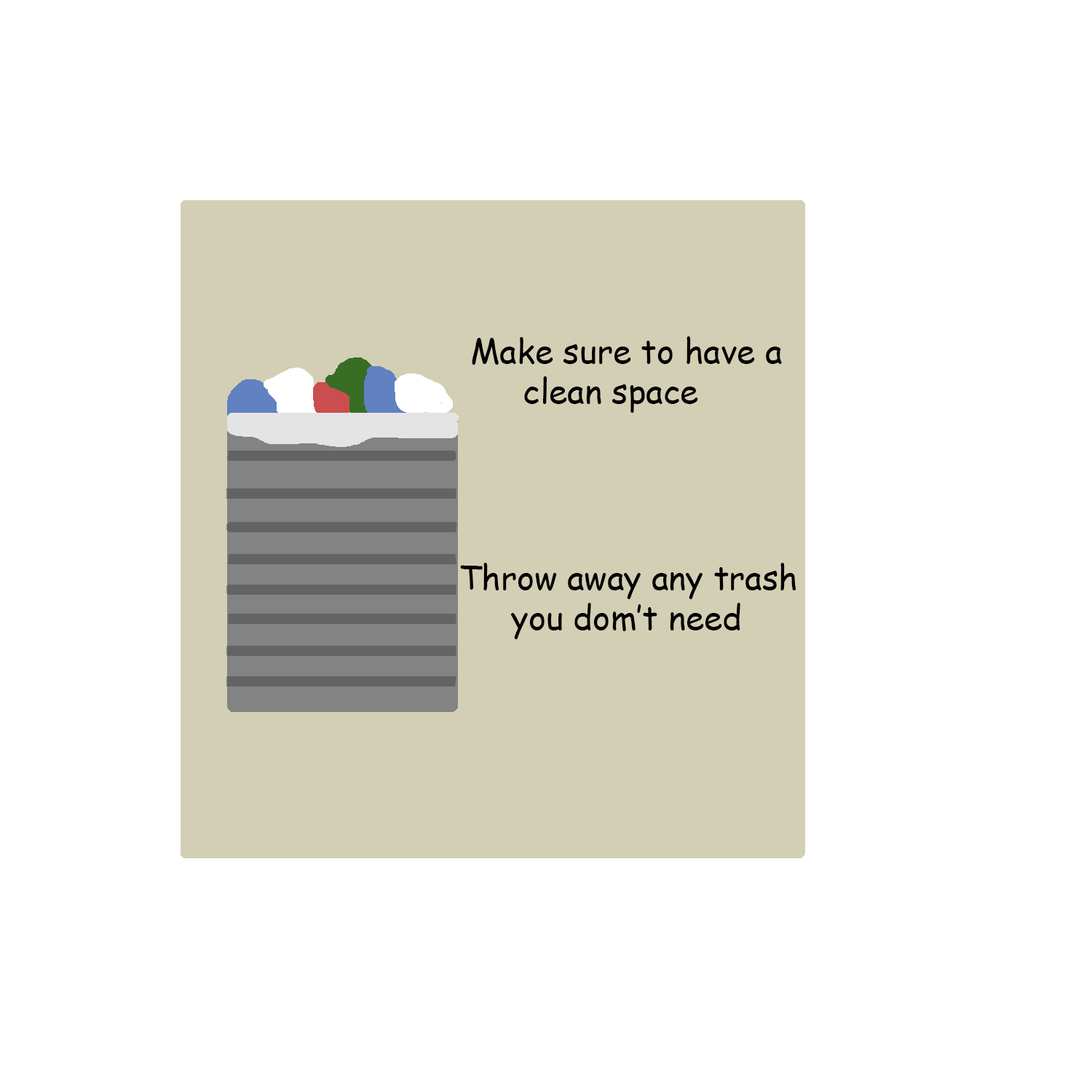
<style>
.page{position:relative;width:1092px;height:1092px;background:#ffffff}
.page>*{position:absolute;margin:0}
.t1{font:33.4px "ComicSansMS";color:#000000}
</style>
<div class="page">
<p class="t1" style="left:472px;top:336px;width:310px;height:77px">Make sure to have a <br>  clean space</p>
<p class="t1" style="left:460px;top:563px;width:336px;height:76px">Throw away any trash <br>  you dom’t need</p>
</div>
